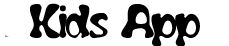
<style>
.page{position:relative;width:229px;height:46px;background:#ffffff}
.page>*{position:absolute;margin:0}
.t1{font:42.1px "Flubber";color:#010101}
</style>
<div class="page">
<p class="t1" style="left:30px;top:3px;width:170px;height:44px">Kids App</p>
</div>
